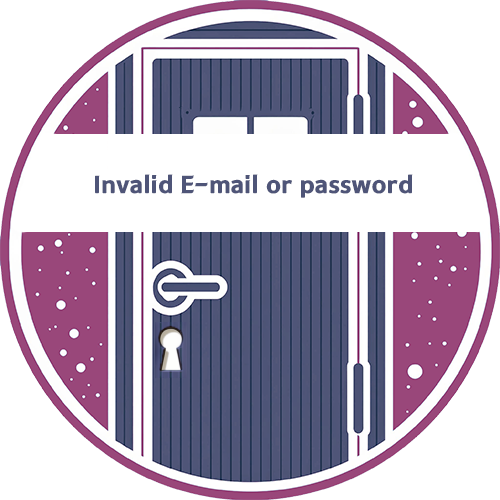
<style>
.page{position:relative;width:500px;height:500px;background:#ffffff}
.page>*{position:absolute;margin:0}
.t1{font:25px "TTHayanbaramB";color:#4f5578}
</style>
<div class="page">
<p class="t1" style="left:95px;top:174px;width:318px;height:24px">Invalid E-mail or password</p>
</div>
